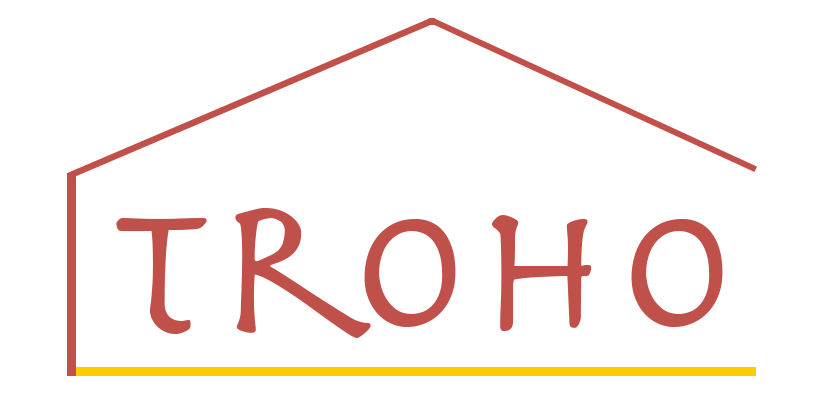
<style>
.page{position:relative;width:840px;height:400px;background:#ffffff}
.page>*{position:absolute;margin:0}
.t1{font:200px "Herculanum";color:#bf514a}
</style>
<div class="page">
<p class="t1" style="left:116px;top:208px;width:607px;height:130px">Troho</p>
</div>
